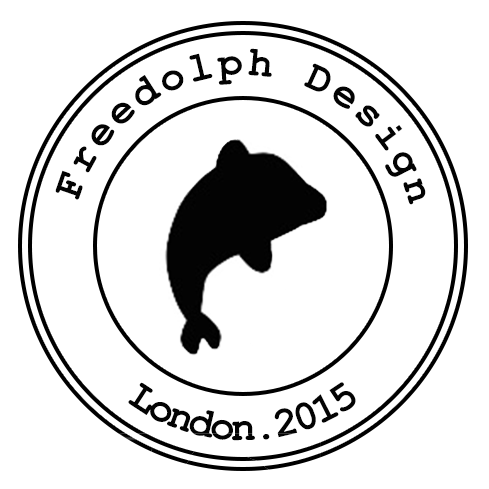
<style>
.page{position:relative;width:489px;height:489px;background:#ffffff}
.page>*{position:absolute;margin:0}
.t1{font:41.7px "CourierNewPS-BoldMT";color:#030303}
</style>
<div class="page">
<p class="t1" style="left:55px;top:48px;width:371px;height:157px">Freedolph Design</p>
<p class="t1" style="left:128px;top:382px;width:228px;height:59px">London.2015</p>
</div>
